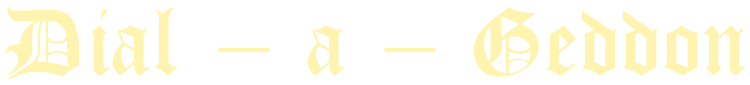
<style>
.page{position:relative;width:750px;height:85px;background:#ffffff}
.page>*{position:absolute;margin:0}
.t1{font:100px "CloisterBlack-Light";color:#fff4af}
</style>
<div class="page">
<p class="t1" style="left:5px;top:5px;width:740px;height:75px">Dial – a – Geddon</p>
</div>
